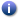
<style>
.page{position:relative;width:19px;height:18px;background:#ffffff}
.page>*{position:absolute;margin:0}
.t1{font:12px "Verdana-Bold";letter-spacing:0.01em;color:#ffffff}
</style>
<div class="page">
<p class="t1" style="left:8px;top:3px;width:2px;height:10px">i</p>
</div>
